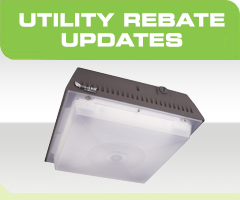
<style>
.page{position:relative;width:240px;height:200px}
.page>*{position:absolute;margin:0}
.t1{font:18px/20.1px "Eurostile-BoldExtendedTwo";letter-spacing:-0.01em;color:#ffffff;text-transform:uppercase;font-weight:bold;scale:0.95 1}
</style>
<div class="page">
<p class="t1" style="left:19px;top:13px;width:206px;height:34px;text-align:center">Utility Rebate<br>Updates</p>
</div>
